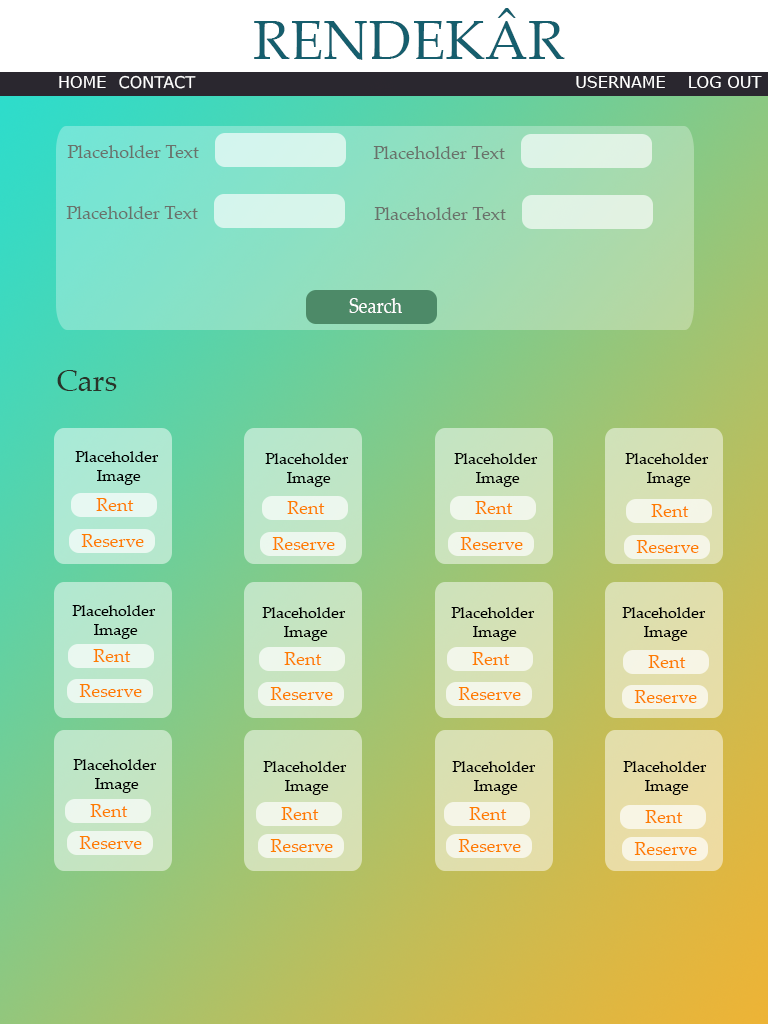
<style>
.page{position:relative;width:768px;height:1024px}
.page>*{position:absolute;margin:0}
.t1{font:55px "PalatinoLinotype-Roman";color:#165e6d}
.t2{font:16px "Verdana";color:#ffffff}
.t3{font:18px "PalatinoLinotype-Roman";color:#6a716a}
.t4{font:20.9px "PalatinoLinotype-Roman";color:#ffffff;scale:0.86 1}
.t5{font:30px "PalatinoLinotype-Roman";color:#2a3329}
.t6{font:16px "PalatinoLinotype-Roman";color:#000000}
.t7{font:18px "PalatinoLinotype-Roman";color:#fe7d00}
</style>
<div class="page">
<p class="t1" style="left:254px;top:8px;width:311px;height:52px">RENDEKÂR</p>
<p class="t2" style="left:59px;top:76px;width:47px;height:12px">HOME</p>
<p class="t2" style="left:119px;top:75px;width:77px;height:14px">CONTACT</p>
<p class="t2" style="left:576px;top:76px;width:89px;height:12px">USERNAME</p>
<p class="t2" style="left:689px;top:76px;width:73px;height:12px">LOG OUT</p>
<p class="t3" style="left:67px;top:145px;width:132px;height:13px">Placeholder Text</p>
<p class="t3" style="left:373px;top:146px;width:132px;height:13px">Placeholder Text</p>
<p class="t3" style="left:66px;top:206px;width:132px;height:13px">Placeholder Text</p>
<p class="t3" style="left:374px;top:207px;width:132px;height:13px">Placeholder Text</p>
<p class="t4" style="left:349px;top:298px;width:53px;height:15px">Search</p>
<p class="t5" style="left:57px;top:370px;width:60px;height:21px">Cars</p>
<p class="t6" style="left:75px;top:451px;width:84px;height:34px;text-align:center">Placeholder <br>Image</p>
<p class="t6" style="left:265px;top:453px;width:84px;height:34px;text-align:center">Placeholder <br>Image</p>
<p class="t6" style="left:454px;top:453px;width:84px;height:34px;text-align:center">Placeholder <br>Image</p>
<p class="t6" style="left:625px;top:453px;width:84px;height:34px;text-align:center">Placeholder <br>Image</p>
<p class="t7" style="left:96px;top:498px;width:38px;height:13px">Rent</p>
<p class="t7" style="left:287px;top:501px;width:38px;height:13px">Rent</p>
<p class="t7" style="left:475px;top:501px;width:38px;height:13px">Rent</p>
<p class="t7" style="left:651px;top:504px;width:38px;height:13px">Rent</p>
<p class="t7" style="left:81px;top:534px;width:63px;height:13px">Reserve</p>
<p class="t7" style="left:272px;top:537px;width:63px;height:13px">Reserve</p>
<p class="t7" style="left:460px;top:537px;width:63px;height:13px">Reserve</p>
<p class="t7" style="left:636px;top:540px;width:63px;height:13px">Reserve</p>
<p class="t6" style="left:72px;top:605px;width:84px;height:34px;text-align:center">Placeholder <br>Image</p>
<p class="t6" style="left:262px;top:607px;width:84px;height:34px;text-align:center">Placeholder <br>Image</p>
<p class="t6" style="left:451px;top:607px;width:84px;height:34px;text-align:center">Placeholder <br>Image</p>
<p class="t6" style="left:622px;top:607px;width:84px;height:34px;text-align:center">Placeholder <br>Image</p>
<p class="t7" style="left:93px;top:649px;width:38px;height:13px">Rent</p>
<p class="t7" style="left:284px;top:652px;width:38px;height:13px">Rent</p>
<p class="t7" style="left:472px;top:652px;width:38px;height:13px">Rent</p>
<p class="t7" style="left:648px;top:655px;width:38px;height:13px">Rent</p>
<p class="t7" style="left:79px;top:684px;width:63px;height:13px">Reserve</p>
<p class="t7" style="left:270px;top:687px;width:63px;height:13px">Reserve</p>
<p class="t7" style="left:458px;top:687px;width:63px;height:13px">Reserve</p>
<p class="t7" style="left:634px;top:690px;width:63px;height:13px">Reserve</p>
<p class="t6" style="left:73px;top:759px;width:84px;height:34px;text-align:center">Placeholder <br>Image</p>
<p class="t6" style="left:263px;top:761px;width:84px;height:34px;text-align:center">Placeholder <br>Image</p>
<p class="t6" style="left:452px;top:761px;width:84px;height:34px;text-align:center">Placeholder <br>Image</p>
<p class="t6" style="left:623px;top:761px;width:84px;height:34px;text-align:center">Placeholder <br>Image</p>
<p class="t7" style="left:90px;top:804px;width:38px;height:13px">Rent</p>
<p class="t7" style="left:281px;top:807px;width:38px;height:13px">Rent</p>
<p class="t7" style="left:469px;top:807px;width:38px;height:13px">Rent</p>
<p class="t7" style="left:645px;top:810px;width:38px;height:13px">Rent</p>
<p class="t7" style="left:79px;top:836px;width:63px;height:13px">Reserve</p>
<p class="t7" style="left:270px;top:839px;width:63px;height:13px">Reserve</p>
<p class="t7" style="left:458px;top:839px;width:63px;height:13px">Reserve</p>
<p class="t7" style="left:634px;top:842px;width:63px;height:13px">Reserve</p>
</div>
